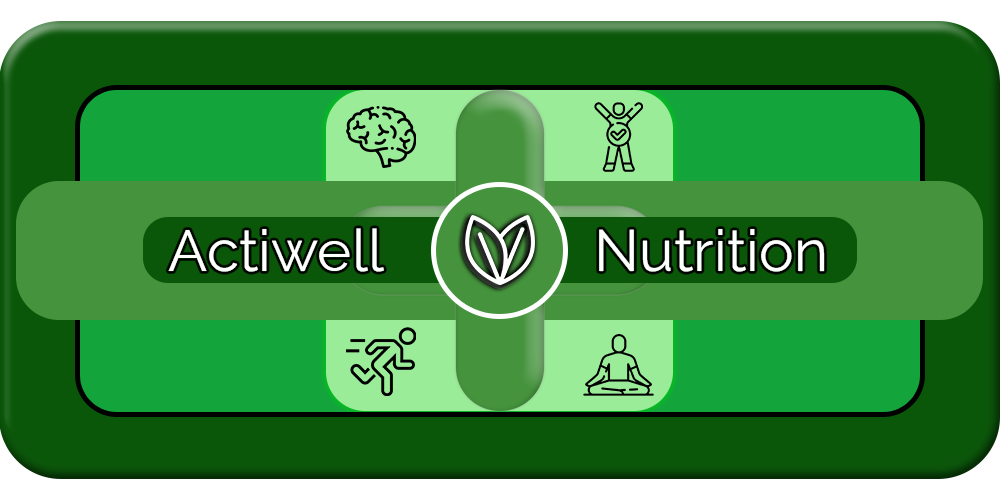
<style>
.page{position:relative;width:1000px;height:500px;background:#0b570a}
.page>*{position:absolute;margin:0}
.t1{font:58.3px "RalewayRoman-Regular";color:#ffffff}
</style>
<div class="page">
<p class="t1" style="left:168px;top:228px;width:216px;height:44px">Actiwell</p>
<p class="t1" style="left:599px;top:229px;width:226px;height:43px">Nutrition</p>
</div>
